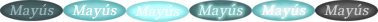
<style>
.page{position:relative;width:378px;height:22px;background:#ffffff}
.page>*{position:absolute;margin:0}
.t1{font:16px "OfficialFateFont-Medium";color:#97b2b3;font-weight:bold;font-style:italic}
.t2{font:16px "OfficialFateFont-Medium";color:#ffffff;font-weight:bold;font-style:italic}
.t3{font:16px "OfficialFateFont-Medium";color:#d6f5f2;font-weight:bold;font-style:italic}
.t4{font:16px "OfficialFateFont-Medium";color:#cacaca;font-weight:bold;font-style:italic}
</style>
<div class="page">
<p class="t1" style="left:9px;top:3px;width:45px;height:16px">Mayús</p>
<p class="t2" style="left:72px;top:3px;width:45px;height:16px">Mayús</p>
<p class="t2" style="left:135px;top:4px;width:45px;height:16px">Mayús</p>
<p class="t3" style="left:198px;top:3px;width:45px;height:16px">Mayús</p>
<p class="t2" style="left:261px;top:3px;width:45px;height:16px">Mayús</p>
<p class="t4" style="left:324px;top:3px;width:45px;height:16px">Mayús</p>
</div>
